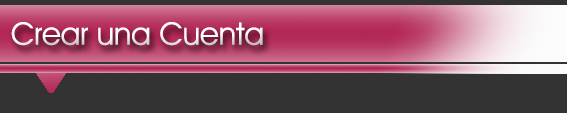
<style>
.page{position:relative;width:567px;height:113px;background:#333333}
.page>*{position:absolute;margin:0}
.t1{font:31.2px "AvantGardeITCbyBT-Book";color:#fffefe}
</style>
<div class="page">
<p class="t1" style="left:11px;top:22px;width:252px;height:24px">Crear una Cuenta</p>
</div>
